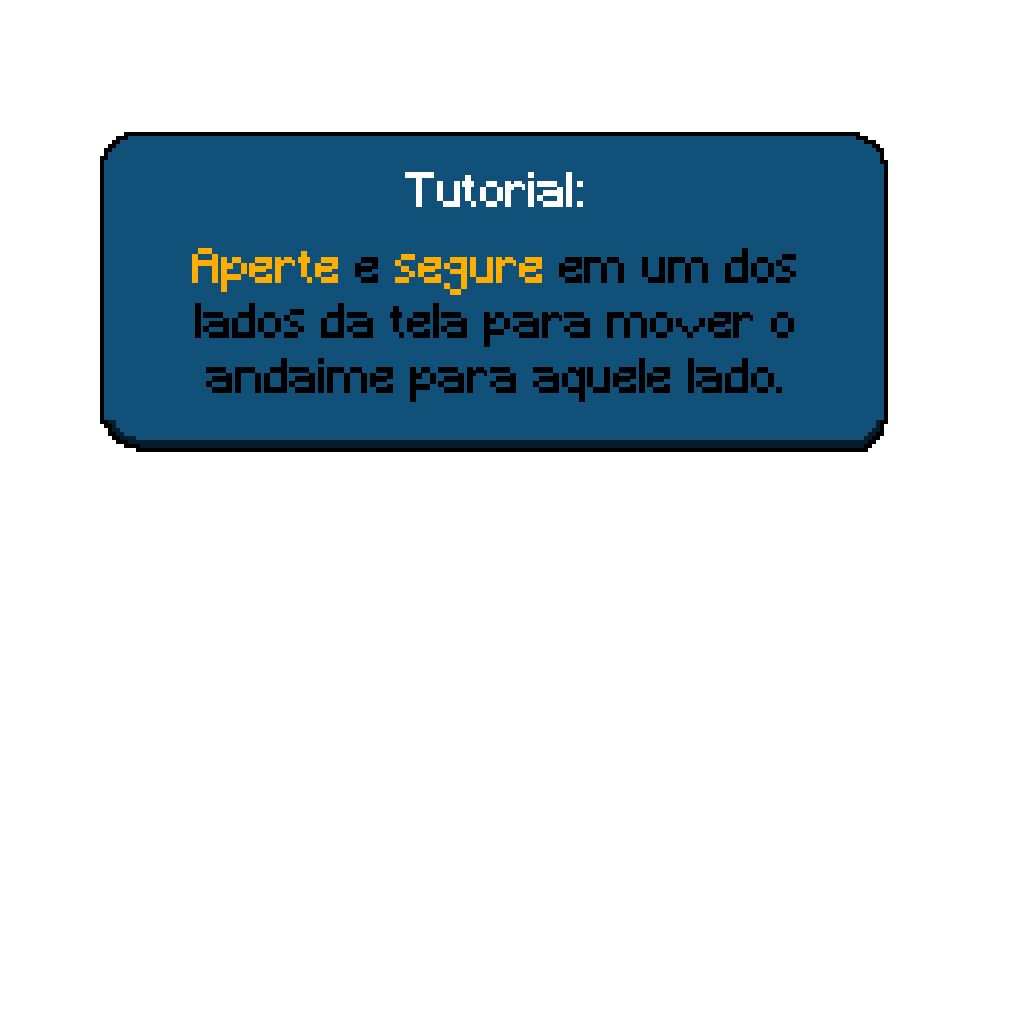
<style>
.page{position:relative;width:1024px;height:1024px;background:#ffffff}
.page>*{position:absolute;margin:0}
.t1{font:45.8px "Minecraft";color:#ffffff}
.t2{font:45.8px "Minecraft";color:#000000}
.t3{font:45.8px "Minecraft";color:#ffae00}
</style>
<div class="page">
<p class="t1" style="left:405px;top:172px;width:178px;height:35px">Tutorial:</p>
<p class="t2" style="left:192px;top:248px;width:604px;height:154px;text-align:center"><span class="t3">Aperte</span> e <span class="t3">segure</span> em um dos lados da tela para mover o andaime para aquele lado.</p>
</div>
